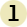
<style>
.page{position:relative;width:27px;height:27px;background:#ede8bb}
.page>*{position:absolute;margin:0}
.t1{font:20px "Unispace-Bold";color:#000000}
</style>
<div class="page">
<p class="t1" style="left:8px;top:5px;width:11px;height:16px">1</p>
</div>
